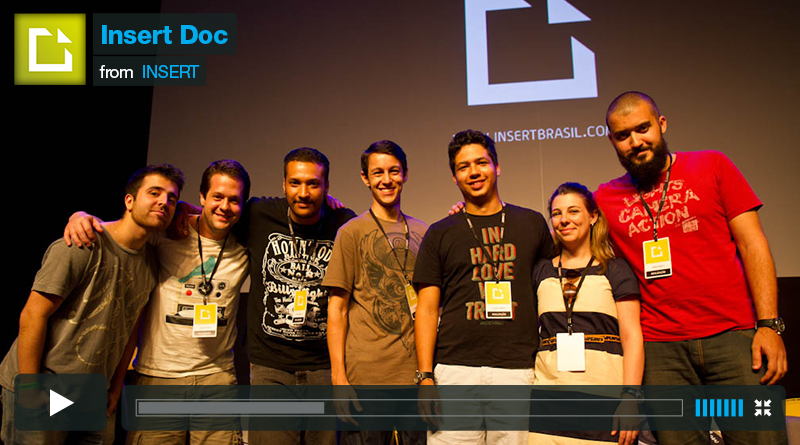
<style>
.page{position:relative;width:800px;height:445px}
.page>*{position:absolute;margin:0}
.t1{font:25.7px "HelveticaNeueLTStd-Hv";letter-spacing:-0.025em;color:#00adef}
.t2{font:17.1px "HelveticaNeueLTStd-Roman";letter-spacing:-0.025em;color:#00adef}
.t3{font:17.1px "HelveticaNeueLTStd-Roman";letter-spacing:-0.025em;color:#ffffff}
</style>
<div class="page">
<p class="t1" style="left:102px;top:25px;width:126px;height:19px">Insert Doc</p>
<p class="t2" style="left:99px;top:65px;width:101px;height:13px"><span class="t3">from  </span>INSERT</p>
</div>
